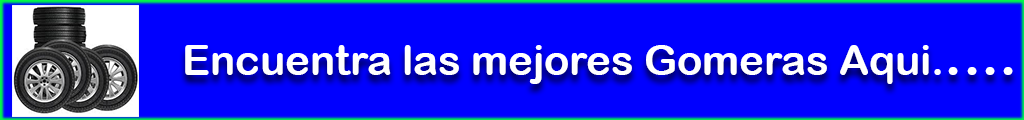
<style>
.page{position:relative;width:1024px;height:120px;background:#0000ff}
.page>*{position:absolute;margin:0}
.t1{font:41.7px "ArialRoundedMTBold";color:#ffffff}
.t2{font:58.3px "ArialRoundedMTBold";color:#ffffff}
</style>
<div class="page">
<p class="t1" style="left:185px;top:45px;width:828px;height:39px">Encuentra las mejores Gomeras Aqui.<span class="t2">....</span></p>
</div>
